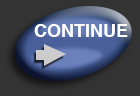
<style>
.page{position:relative;width:140px;height:96px;background:#333333}
.page>*{position:absolute;margin:0}
.t1{font:18px "Helvetica-Bold";color:#ffffff}
</style>
<div class="page">
<p class="t1" style="left:34px;top:24px;width:94px;height:13px">CONTINUE</p>
</div>
